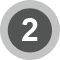
<style>
.page{position:relative;width:60px;height:60px;background:#525553}
.page>*{position:absolute;margin:0}
.t1{font:32px "Arial-BoldMT";color:#ffffff}
</style>
<div class="page">
<p class="t1" style="left:21px;top:18px;width:17px;height:23px">2</p>
</div>
